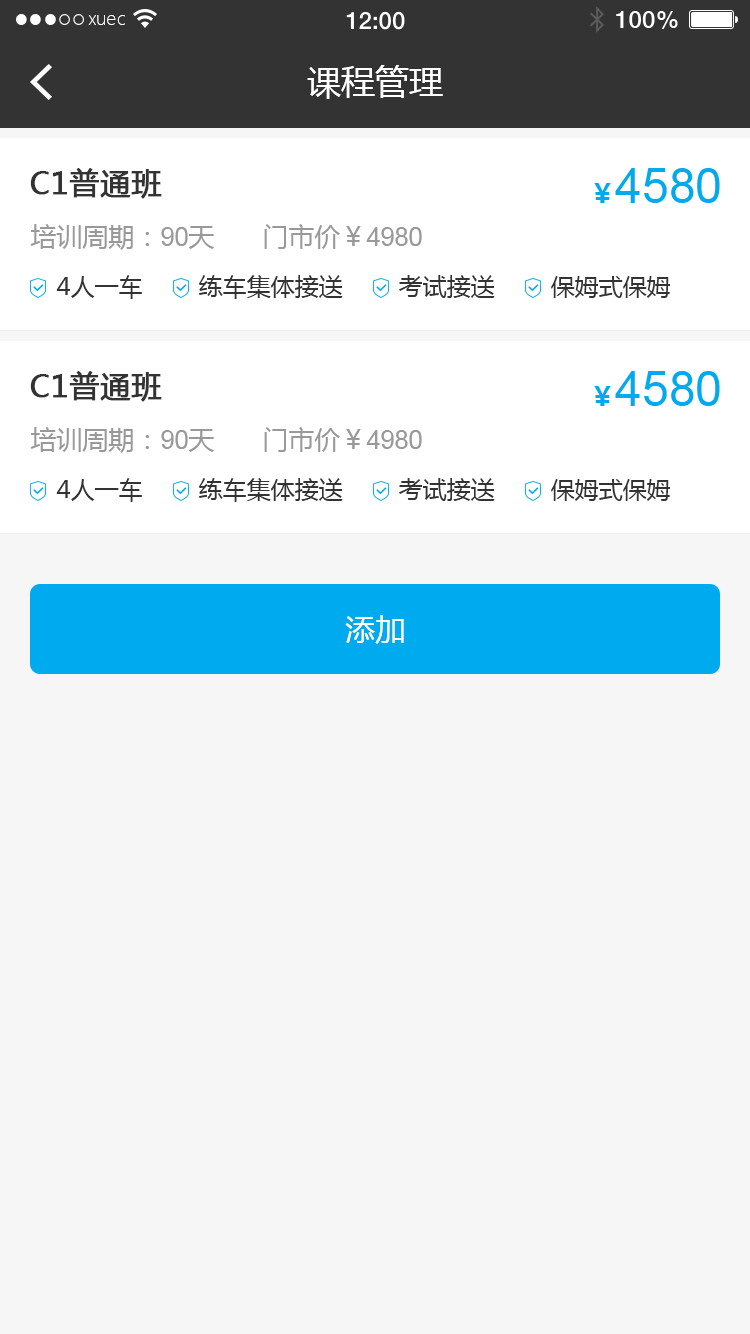
<style>
.page{position:relative;width:750px;height:1334px;background:#f6f6f6}
.page>*{position:absolute;margin:0}
.t1{font:18px "MicrosoftYaHeiLight";color:#ffffff}
.t2{font:34px "MicrosoftYaHei";color:#ffffff}
.t3{font:30px "MicrosoftYaHei";color:#333333;font-weight:bold}
.t4{font:48px "ArialMT";color:#00aaee}
.t5{font:26px "MicrosoftYaHei-Bold";color:#00aaee}
.t6{font:26px "MicrosoftYaHei";color:#999999}
.t7{font:26px "ArialMT";color:#999999}
.t8{font:24px "MicrosoftYaHei";color:#333333}
.t9{font:30px "MicrosoftYaHei";color:#ffffff}
</style>
<div class="page">
<p class="t1" style="left:88px;top:15px;width:37px;height:10px">xuec</p>
<p class="t2" style="left:307px;top:65px;width:136px;height:34px">课程管理</p>
<p class="t3" style="left:30px;top:168px;width:132px;height:31px">C1普通班</p>
<p class="t4" style="left:594px;top:168px;width:126px;height:35px"><span class="t5">￥</span>4580</p>
<p class="t6" style="left:30px;top:224px;width:184px;height:26px">培训周期：<span class="t7">90</span>天</p>
<p class="t6" style="left:264px;top:224px;width:158px;height:25px">门市价￥<span class="t7">4980</span></p>
<p class="t8" style="left:56px;top:275px;width:614px;height:24px">4人一车        练车集体接送        考试接送        保姆式保姆</p>
<p class="t3" style="left:30px;top:371px;width:132px;height:31px">C1普通班</p>
<p class="t4" style="left:594px;top:371px;width:126px;height:35px"><span class="t5">￥</span>4580</p>
<p class="t6" style="left:30px;top:427px;width:184px;height:26px">培训周期：<span class="t7">90</span>天</p>
<p class="t6" style="left:264px;top:427px;width:158px;height:25px">门市价￥<span class="t7">4980</span></p>
<p class="t8" style="left:56px;top:478px;width:614px;height:24px">4人一车        练车集体接送        考试接送        保姆式保姆</p>
<p class="t9" style="left:345px;top:615px;width:59px;height:29px">添加</p>
</div>
